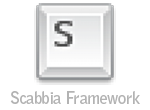
<style>
.page{position:relative;width:150px;height:110px;background:#ffffff}
.page>*{position:absolute;margin:0}
.t1{font:16.3px "BellGothicStd-Bold";letter-spacing:-0.03em;color:#b3b3b3}
</style>
<div class="page">
<p class="t1" style="left:10px;top:91px;width:130px;height:13px">Scabbia Framework</p>
</div>
